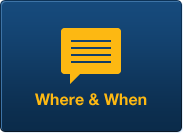
<style>
.page{position:relative;width:183px;height:133px}
.page>*{position:absolute;margin:0}
.t1{font:16px "HelveticaNeueLTStd-Bd";color:#fdb812}
</style>
<div class="page">
<p class="t1" style="left:35px;top:93px;width:112px;height:13px">Where &amp; When</p>
</div>
